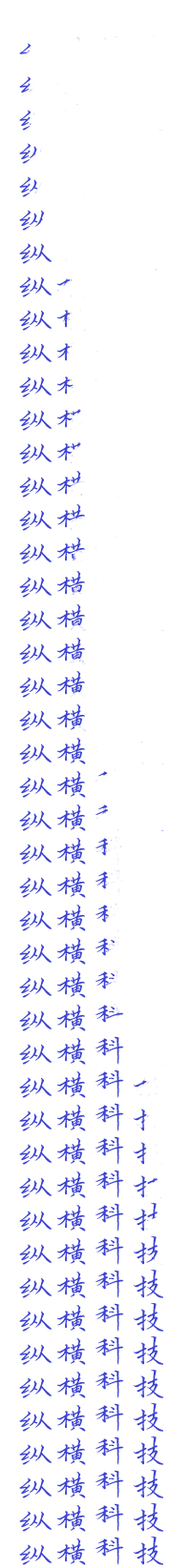
<style>
.page{position:relative;width:191px;height:1568px;background:#ffffff}
.page>*{position:absolute;margin:0}
.t1{font:26.7px "Ñ¦ÎÄÐù¸Ö±Ê¿¬Ìå";color:#3c43d0}
</style>
<div class="page">
<p class="t1" style="left:19px;top:1303px;width:144px;height:29px">纵横科技</p>
<p class="t1" style="left:19px;top:1336px;width:144px;height:29px">纵横科技</p>
<p class="t1" style="left:19px;top:1370px;width:144px;height:28px">纵横科技</p>
<p class="t1" style="left:19px;top:1403px;width:144px;height:29px">纵横科技</p>
<p class="t1" style="left:19px;top:1436px;width:144px;height:29px">纵横科技</p>
<p class="t1" style="left:19px;top:1470px;width:144px;height:28px">纵横科技</p>
<p class="t1" style="left:19px;top:1503px;width:144px;height:29px">纵横科技</p>
<p class="t1" style="left:19px;top:1537px;width:144px;height:28px">纵横科技</p>
</div>
